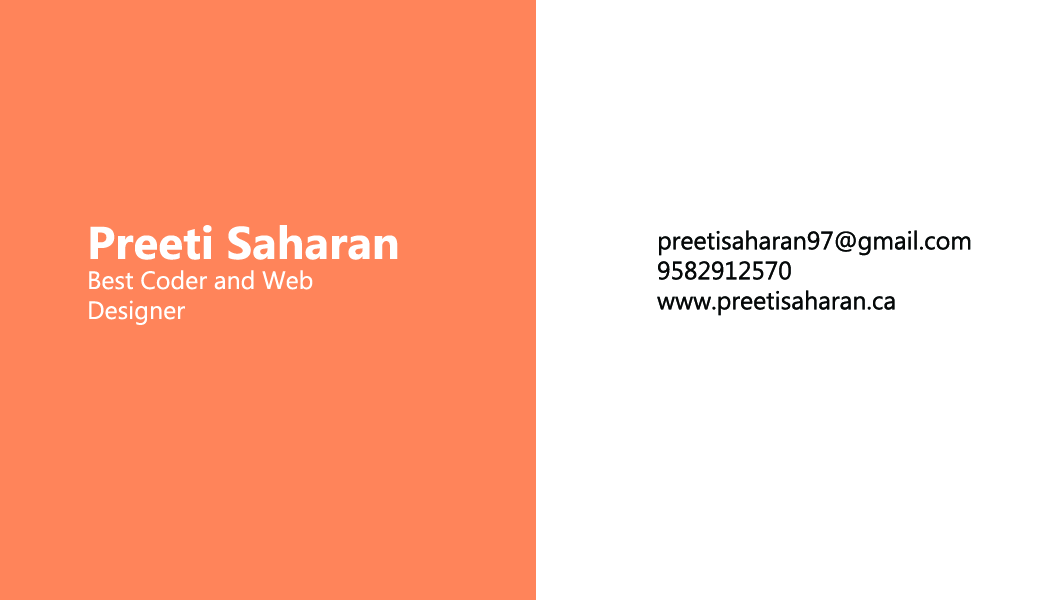
<style>
.page{position:relative;width:1050px;height:600px;background:#ff845a}
.page>*{position:absolute;margin:0}
.t1{font:25px "MyanmarText";color:#ffffff}
.t2{font:45.8px "MyanmarText-Bold";color:#ffffff}
.t3{font:25px "MyanmarText";color:#060808}
</style>
<div class="page">
<p class="t1" style="left:89px;top:225px;width:309px;height:100px"><span class="t2">Preeti Saharan<br></span>Best Coder and Web<br>Designer</p>
<p class="t3" style="left:657px;top:230px;width:314px;height:86px">preetisaharan97@gmail.com<br>9582912570<br>www.preetisaharan.ca</p>
</div>
